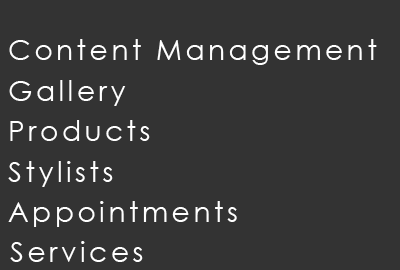
<style>
.page{position:relative;width:400px;height:270px;background:#333333}
.page>*{position:absolute;margin:0}
.t1{font:28px "CenturyGothic";letter-spacing:0.125em;color:#ffffff}
</style>
<div class="page">
<p class="t1" style="left:9px;top:39px;width:368px;height:26px">Content Management</p>
<p class="t1" style="left:9px;top:80px;width:117px;height:26px">Gallery</p>
<p class="t1" style="left:10px;top:120px;width:140px;height:21px">Products</p>
<p class="t1" style="left:8px;top:161px;width:105px;height:26px">Stylists</p>
<p class="t1" style="left:8px;top:201px;width:229px;height:26px">Appointments</p>
<p class="t1" style="left:10px;top:241px;width:133px;height:21px">Services</p>
</div>
